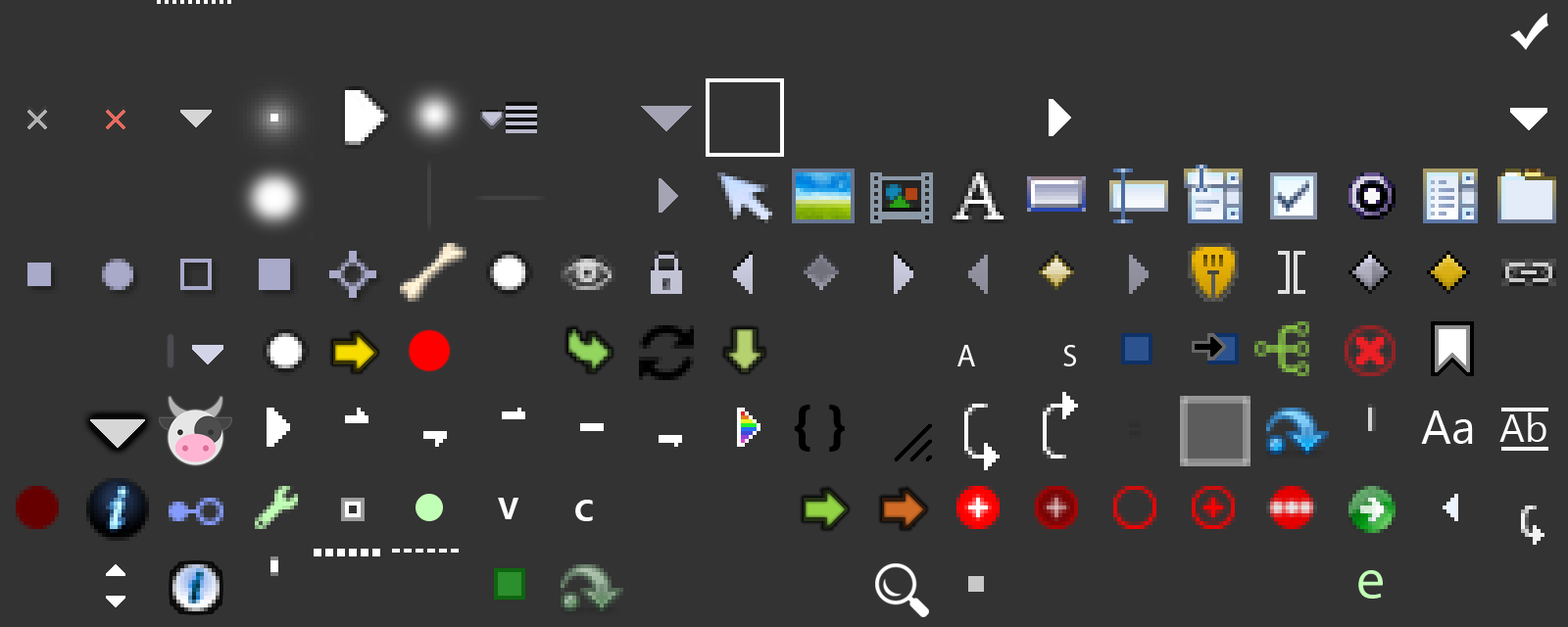
<style>
.page{position:relative;width:1568px;height:627px;background:#333333}
.page>*{position:absolute;margin:0}
.t1{font:31.4px "MyriadPro-Regular";color:#ffffff}
.t2{font:54.9px "SegoeUI-Bold";color:#000000}
.t3{font:47px "LaoUI";color:#ffffff}
.t4{font:39.2px "LaoUI";color:#ffffff}
.t5{font:31.4px "Ebrima-Bold";color:#ffffff}
.t6{font:56.8px "MyriadPro-Regular";color:#c2ffb6}
</style>
<div class="page">
<p class="t1" style="left:957px;top:345px;width:18px;height:22px">A</p>
<p class="t1" style="left:1063px;top:345px;width:13px;height:22px">S</p>
<p class="t2" style="left:794px;top:405px;width:51px;height:47px">{ }</p>
<p class="t3" style="left:1421px;top:411px;width:52px;height:33px">Aa</p>
<p class="t4" style="left:1499px;top:413px;width:47px;height:29px">Ab</p>
<p class="t5" style="left:498px;top:498px;width:21px;height:21px">V</p>
<p class="t5" style="left:575px;top:500px;width:18px;height:21px">C</p>
<p class="t6" style="left:1358px;top:570px;width:25px;height:29px">e</p>
</div>
